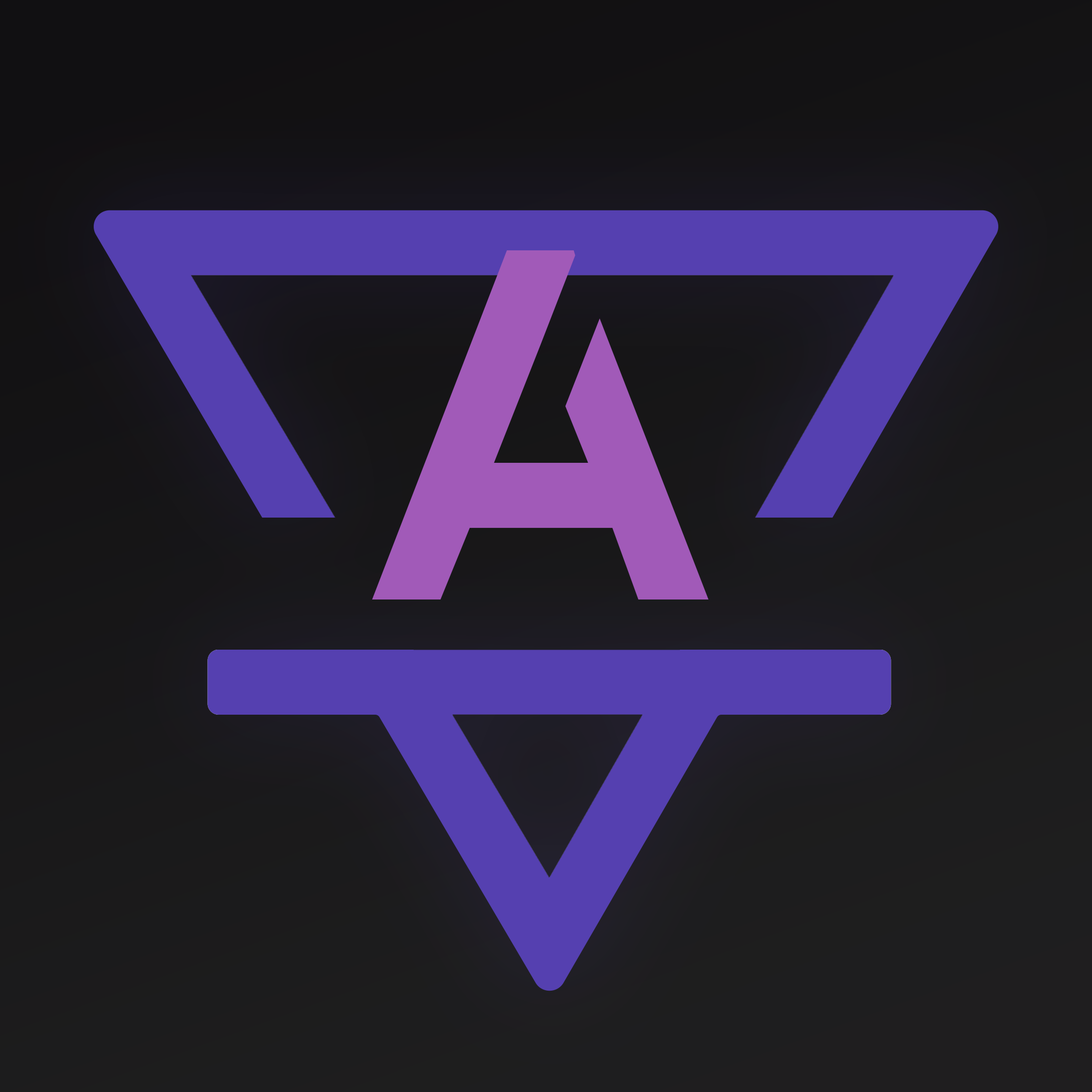
<style>
.page{position:relative;width:1092px;height:1092px}
.page>*{position:absolute;margin:0}
.t1{font:511.9px "Qualy-Bold";color:#a15ab8}
</style>
<div class="page">
<p class="t1" style="left:372px;top:250px;width:337px;height:349px">A</p>
</div>
